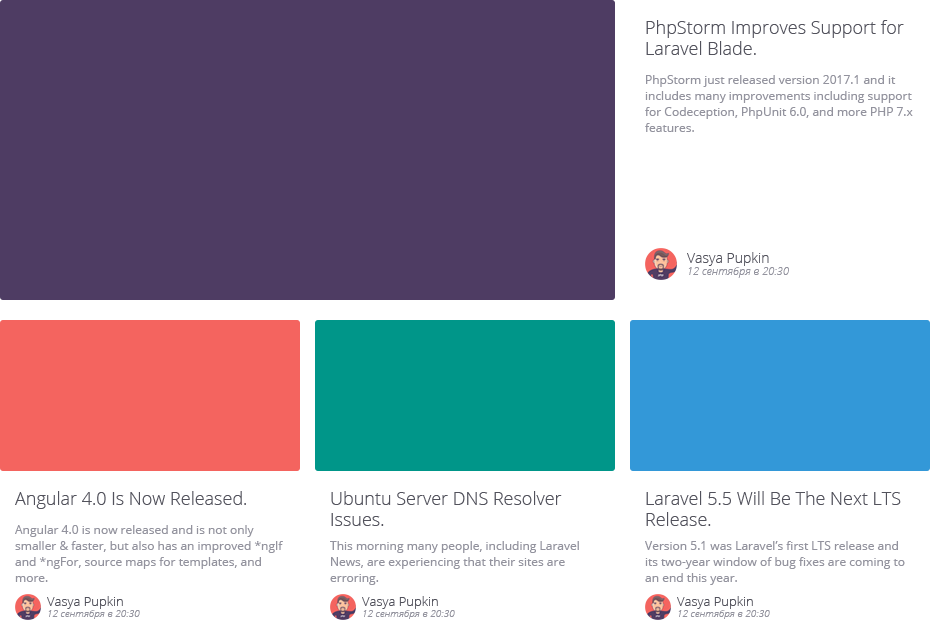
<style>
.page{position:relative;width:930px;height:620px;background:#ffffff}
.page>*{position:absolute;margin:0}
.t1{font:18px "OpenSans-Light";color:#52525c}
.t2{font:12px/16px "OpenSans";color:#93939e}
.t3{font:14px "OpenSans-Light";color:#52525c}
.t4{font:11px "OpenSansLight-Italic";color:#93939e}
.t5{font:13px "OpenSans-Light";color:#52525c}
.t6{font:10px "OpenSansLight-Italic";color:#93939e}
</style>
<div class="page">
<p class="t1" style="left:646px;top:20px;width:258px;height:35px">PhpStorm Improves Support for Laravel Blade.</p>
<p class="t2" style="left:645px;top:75px;width:268px;height:57px">PhpStorm just released version 2017.1 and it includes many improvements including support for Codeception, PhpUnit 6.0, and more PHP 7.x features.</p>
<p class="t3" style="left:687px;top:252px;width:82px;height:14px">Vasya Pupkin</p>
<p class="t4" style="left:688px;top:267px;width:101px;height:11px">12 сентября в 20:30</p>
<p class="t1" style="left:15px;top:491px;width:231px;height:18px">Angular 4.0 Is Now Released.</p>
<p class="t1" style="left:331px;top:491px;width:231px;height:35px">Ubuntu Server DNS Resolver Issues.</p>
<p class="t1" style="left:646px;top:491px;width:255px;height:35px">Laravel 5.5 Will Be The Next LTS Release.</p>
<p class="t2" style="left:15px;top:525px;width:268px;height:57px">Angular 4.0 is now released and is not only smaller &amp; faster, but also has an improved *ngIf and *ngFor, source maps for templates, and more.</p>
<p class="t2" style="left:330px;top:541px;width:249px;height:44px">This morning many people, including Laravel News, are experiencing that their sites are erroring.</p>
<p class="t2" style="left:645px;top:541px;width:260px;height:44px">Version 5.1 was Laravel’s first LTS release and its two-year window of bug fixes are coming to an end this year.</p>
<p class="t5" style="left:47px;top:596px;width:76px;height:13px">Vasya Pupkin</p>
<p class="t5" style="left:362px;top:596px;width:76px;height:13px">Vasya Pupkin</p>
<p class="t5" style="left:677px;top:596px;width:76px;height:13px">Vasya Pupkin</p>
<p class="t6" style="left:48px;top:610px;width:92px;height:9px">12 сентября в 20:30</p>
<p class="t6" style="left:363px;top:610px;width:92px;height:9px">12 сентября в 20:30</p>
<p class="t6" style="left:678px;top:610px;width:92px;height:9px">12 сентября в 20:30</p>
</div>
